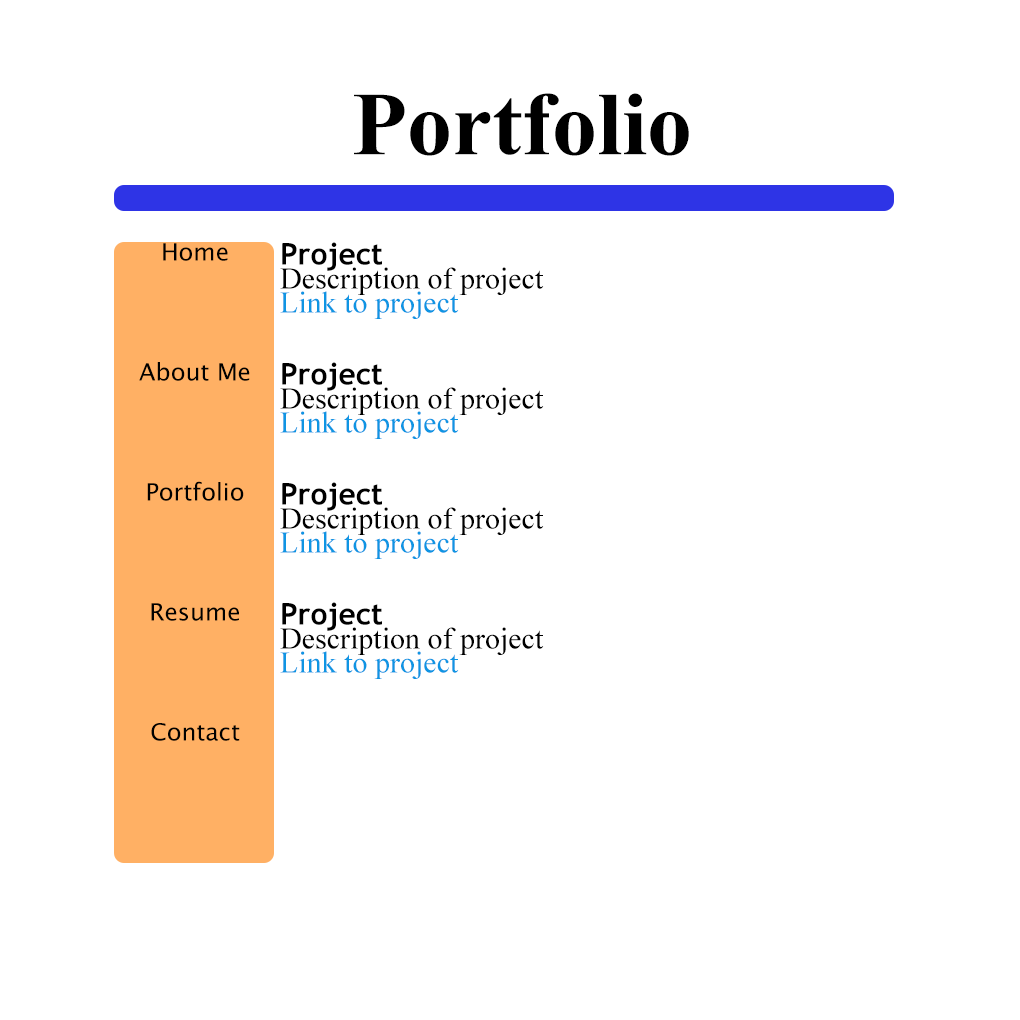
<style>
.page{position:relative;width:1020px;height:1020px;background:#ffffff}
.page>*{position:absolute;margin:0}
.t1{font:90px "TimesNewRomanPS-BoldMT";color:#000000}
.t2{font:24px/24px "LucidaSansUnicode";color:#000000}
.t3{font:30px/24px "TimesNewRomanPSMT";color:#000000}
.t4{font:30px/24px "TrebuchetMS-Bold";color:#000000}
.t5{font:30px/24px "TimesNewRomanPSMT";color:#0f95e3}
</style>
<div class="page">
<p class="t1" style="left:354px;top:93px;width:335px;height:63px">Portfolio</p>
<p class="t2" style="left:139px;top:243px;width:111px;height:498px;text-align:center">Home<br><br><br><br><br>About Me<br><br><br><br><br>Portfolio<br><br><br><br><br>Resume<br><br><br><br><br>Contact</p>
<p class="t3" style="left:280px;top:242px;width:264px;height:437px"><span class="t4">Project<br></span>Description of project<br><span class="t5">Link to project<br><br><br></span><span class="t4">Project<br></span>Description of project<br><span class="t5">Link to project<br><br><br></span><span class="t4">Project<br></span>Description of project<br><span class="t5">Link to project<br><br><br></span><span class="t4">Project<br></span>Description of project<br><span class="t5">Link to project</span></p>
</div>
